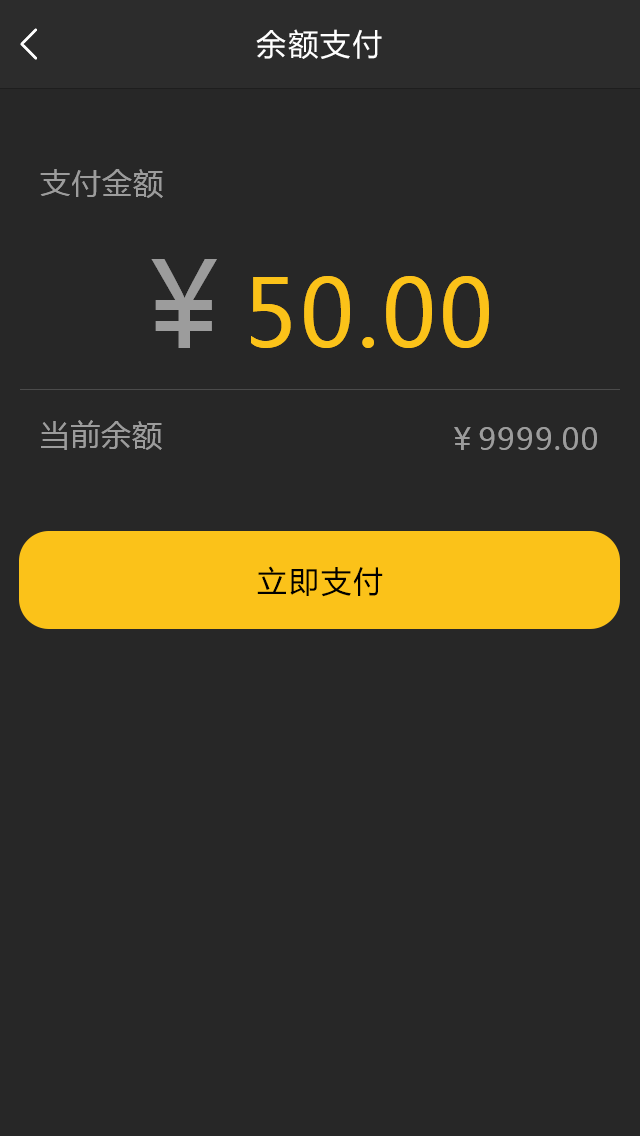
<style>
.page{position:relative;width:640px;height:1136px;background:#272727}
.page>*{position:absolute;margin:0}
.t1{font:30px "MicrosoftYaHei";letter-spacing:0.07em;color:#ffffff}
.t2{font:30px "MicrosoftYaHei";letter-spacing:0.03em;color:#9c9c9c}
.t3{font:118.1px "MicrosoftYaHei";letter-spacing:0.03em;color:#9c9c9c}
.t4{font:92.5px "MicrosoftYaHei";letter-spacing:0.03em;color:#fbc219}
.t5{font:30px "MicrosoftYaHei";letter-spacing:0.07em;color:#000000}
</style>
<div class="page">
<p class="t1" style="left:256px;top:29px;width:126px;height:30px">余额支付</p>
<p class="t2" style="left:40px;top:169px;width:123px;height:29px">支付金额</p>
<p class="t3" style="left:151px;top:259px;width:66px;height:89px">￥</p>
<p class="t4" style="left:251px;top:276px;width:238px;height:72px">50.00</p>
<p class="t2" style="left:41px;top:420px;width:121px;height:30px">当前余额</p>
<p class="t2" style="left:454px;top:427px;width:143px;height:23px">￥9999.00</p>
<p class="t5" style="left:257px;top:566px;width:126px;height:31px">立即支付</p>
</div>
